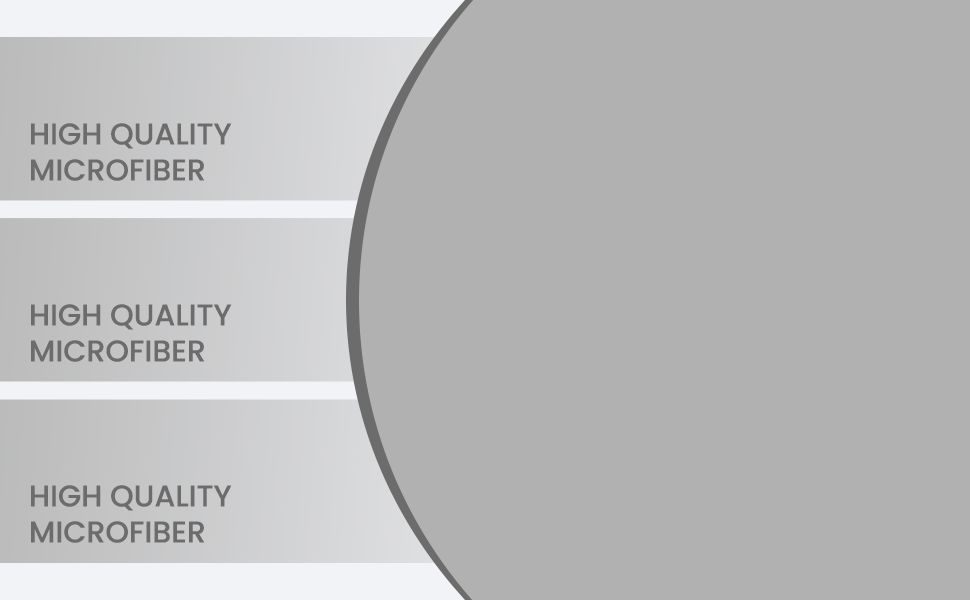
<style>
.page{position:relative;width:970px;height:600px;background:#b1b1b1}
.page>*{position:absolute;margin:0}
.t1{font:30px "Poppins-Medium";color:#6c6c6c;text-transform:uppercase}
</style>
<div class="page">
<p class="t1" style="left:31px;top:123px;width:201px;height:58px">HIGH QUALITY<br>MICROFIBER</p>
<p class="t1" style="left:31px;top:304px;width:201px;height:58px">HIGH QUALITY<br>MICROFIBER</p>
<p class="t1" style="left:31px;top:485px;width:201px;height:58px">HIGH QUALITY<br>MICROFIBER</p>
</div>
